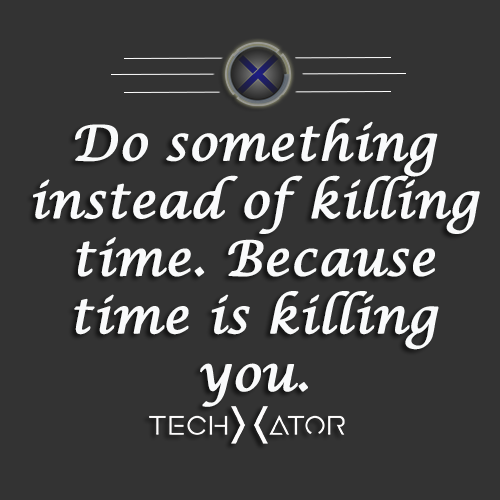
<style>
.page{position:relative;width:500px;height:500px;background:#333333}
.page>*{position:absolute;margin:0}
.t1{font:48px "LucidaCalligraphy-Italic";color:#f9fafb;font-weight:bold}
</style>
<div class="page">
<p class="t1" style="left:33px;top:118px;width:447px;height:289px;text-align:center">Do something<br>instead of killing<br>time. Because<br>time is killing<br>you.</p>
</div>
